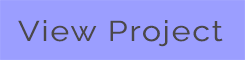
<style>
.page{position:relative;width:245px;height:60px;background:#9b9eff}
.page>*{position:absolute;margin:0}
.t1{font:28.5px "Raleway";letter-spacing:0.06em;color:#4b4848;scale:1.12 1}
</style>
<div class="page">
<p class="t1" style="left:18px;top:20px;width:205px;height:27px">View Project</p>
</div>
